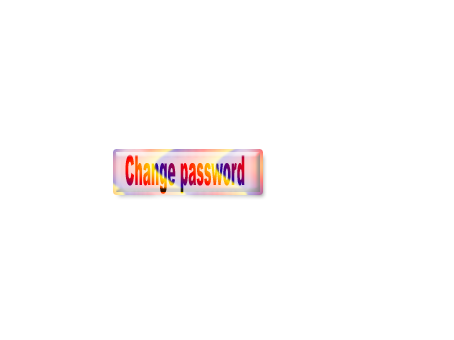
<style>
.page{position:relative;width:454px;height:340px;background:#ffffff}
.page>*{position:absolute;margin:0}
.t1{font:41.4px "Arial-Black";scale:0.3 1}
</style>
<div class="page">
<p class="t1" style="left:125px;top:154px;width:120px;height:40px">Change password</p>
</div>
